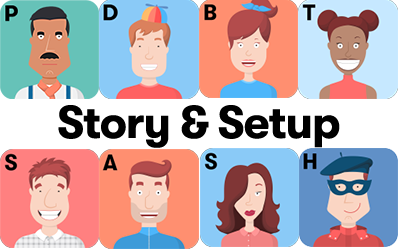
<style>
.page{position:relative;width:400px;height:250px}
.page>*{position:absolute;margin:0}
.t1{font:45.6px "GTWalsheimPro-Bold";letter-spacing:-0.02em;color:#000000}
</style>
<div class="page">
<p class="t1" style="left:58px;top:105px;width:282px;height:43px">Story &amp; Setup</p>
</div>
